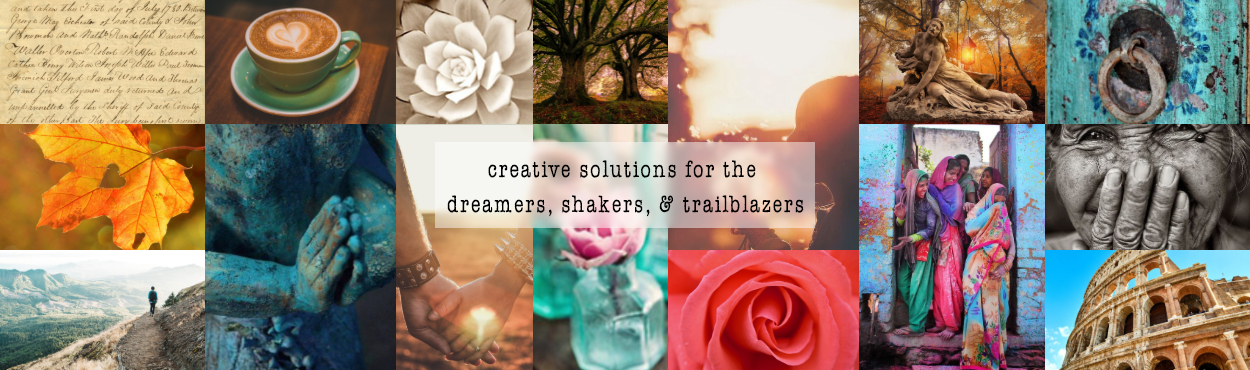
<style>
.page{position:relative;width:1250px;height:370px}
.page>*{position:absolute;margin:0}
.t1{font:24.5px/5px "AmerTypewriterITCbyBT-Medium";letter-spacing:0.033em;color:#000000;scale:0.84 1}
</style>
<div class="page">
<p class="t1" style="left:447px;top:160px;width:357px;height:57px;text-align:center">creative solutions for the <br><br><br><br><br><br><br>dreamers, shakers, &amp; trailblazers</p>
</div>
